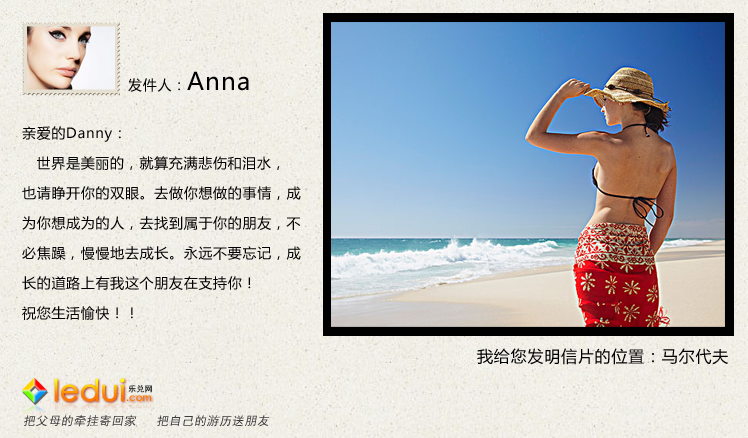
<style>
.page{position:relative;width:748px;height:438px}
.page>*{position:absolute;margin:0}
.t1{font:14px "MicrosoftYaHei";letter-spacing:0.05em;color:#000000}
.t2{font:24px "MicrosoftYaHei";letter-spacing:0.05em;color:#000000}
.t3{font:14px/30px "MicrosoftYaHei";letter-spacing:0.05em;color:#000000}
.t4{font:16px "MicrosoftYaHei";letter-spacing:0.05em;color:#000000}
.t5{font:29.4px "CenturyGothic";font-weight:bold}
.t6{font:9.8px "CenturyGothic";font-weight:bold}
.t7{font:7.9px "SimHei";letter-spacing:0.05em;color:#3d3d3d}
.t8{font:12px "SimHei";letter-spacing:0.05em;color:#3c3c3c;font-style:italic}
</style>
<div class="page">
<p class="t1" style="left:128px;top:71px;width:121px;height:21px">发件人：<span class="t2">Anna</span></p>
<p class="t3" style="left:22px;top:126px;width:279px;height:194px">亲爱的Danny： <br>   世界是美丽的，就算充满悲伤和泪水，<br>也请睁开你的双眼。去做你想做的事情，成<br>为你想成为的人，去找到属于你的朋友，不<br>必焦躁，慢慢地去成长。永远不要忘记，成<br>长的道路上有我这个朋友在支持你！<br>祝您生活愉快！！</p>
<p class="t4" style="left:477px;top:348px;width:251px;height:17px">我给您发明信片的位置：马尔代夫</p>
<p class="t5" style="left:54px;top:378px;width:97px;height:24px">ledui<span class="t6">.com</span></p>
<p class="t7" style="left:128px;top:385px;width:24px;height:8px">乐兑网</p>
<p class="t8" style="left:24px;top:415px;width:246px;height:12px">把父母的牵挂寄回家   把自己的游历送朋友</p>
</div>
